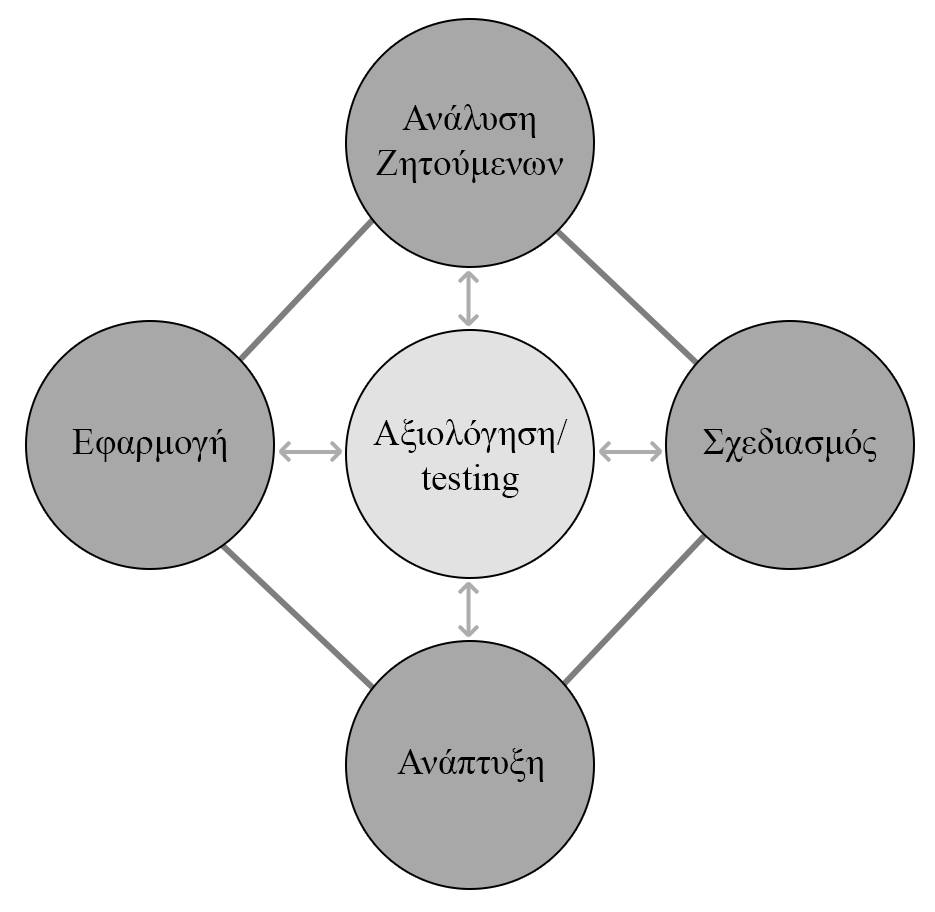
<style>
.page{position:relative;width:935px;height:912px;background:#ffffff}
.page>*{position:absolute;margin:0}
.t1{font:37.1px "TimesNewRomanPSMT";color:#000000}
</style>
<div class="page">
<p class="t1" style="left:376px;top:104px;width:188px;height:79px;text-align:center">Ανάλυση<br>Ζητούμενων</p>
<p class="t1" style="left:373px;top:419px;width:195px;height:79px;text-align:center">Αξιολόγηση/<br>testing</p>
<p class="t1" style="left:72px;top:429px;width:155px;height:33px">Εφαρμογή</p>
<p class="t1" style="left:703px;top:428px;width:174px;height:34px">Σχεδιασμός</p>
<p class="t1" style="left:397px;top:748px;width:147px;height:34px">Ανάπτυξη</p>
</div>
